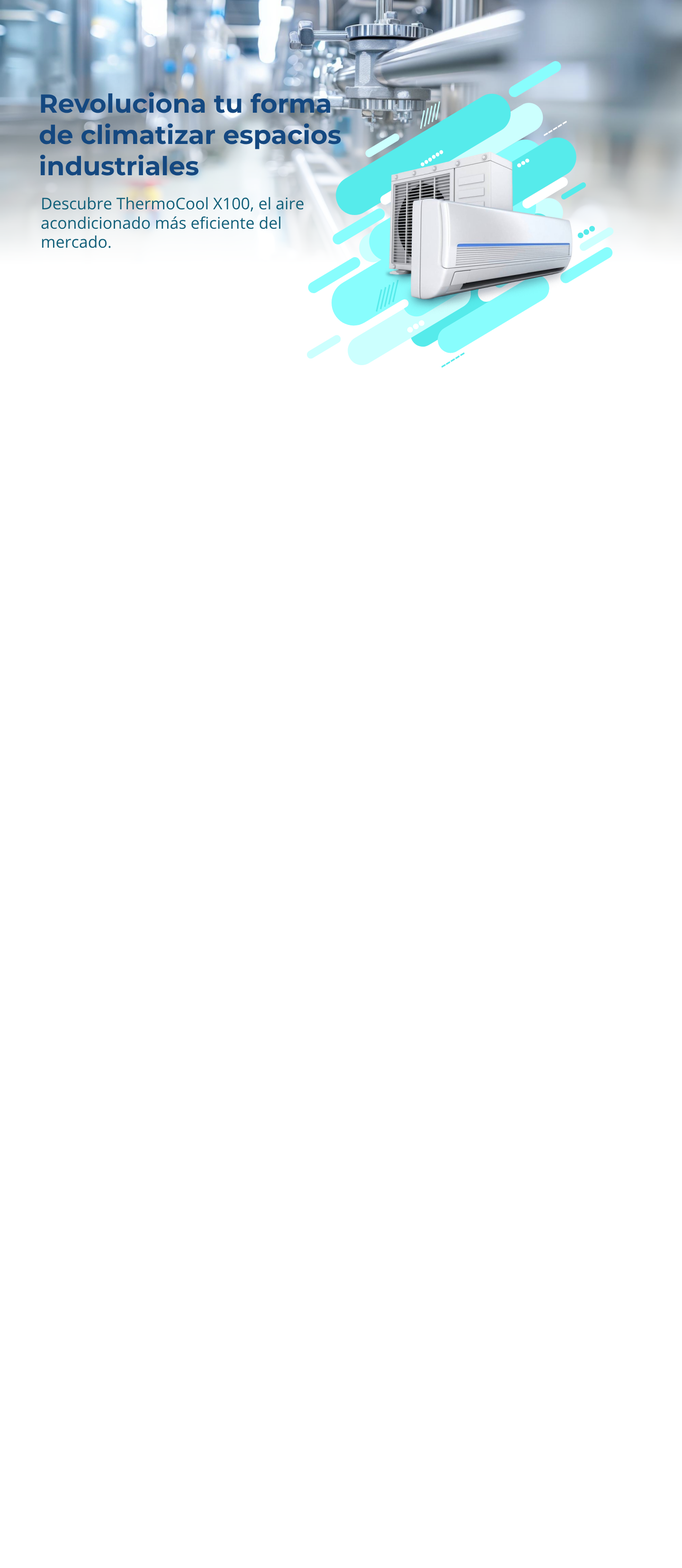
<style>
.page{position:relative;width:682px;height:1568px;background:#ffffff}
.page>*{position:absolute;margin:0}
.t1{font:26px "Montserrat-Bold";color:#144880}
.t2{font:16.1px "OpenSans-Regular";color:#115f79}
</style>
<div class="page">
<p class="t1" style="left:39px;top:92px;width:302px;height:84px">Revoluciona tu forma de climatizar espacios industriales</p>
<p class="t2" style="left:41px;top:197px;width:263px;height:51px">Descubre ThermoCool X100, el aire acondicionado más eficiente del mercado.</p>
</div>
